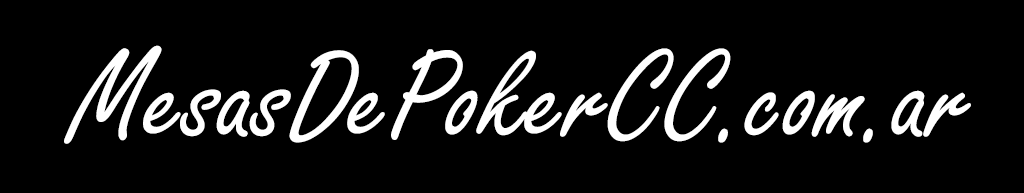
<style>
.page{position:relative;width:1024px;height:193px;background:#000000}
.page>*{position:absolute;margin:0}
.t1{font:135.4px "FreestyleScript-Regular";color:#ffffff}
</style>
<div class="page">
<p class="t1" style="left:64px;top:45px;width:907px;height:99px">MesasDePokerCC.com.ar</p>
</div>
